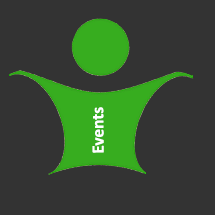
<style>
.page{position:relative;width:215px;height:215px;background:#333333}
.page>*{position:absolute;margin:0}
.t1{font:17.3px "Calibri-Bold";color:#ffffff}
</style>
<div class="page">
<p class="t1" style="left:92px;top:107px;width:12px;height:46px;rotate:-91deg">Events</p>
</div>
